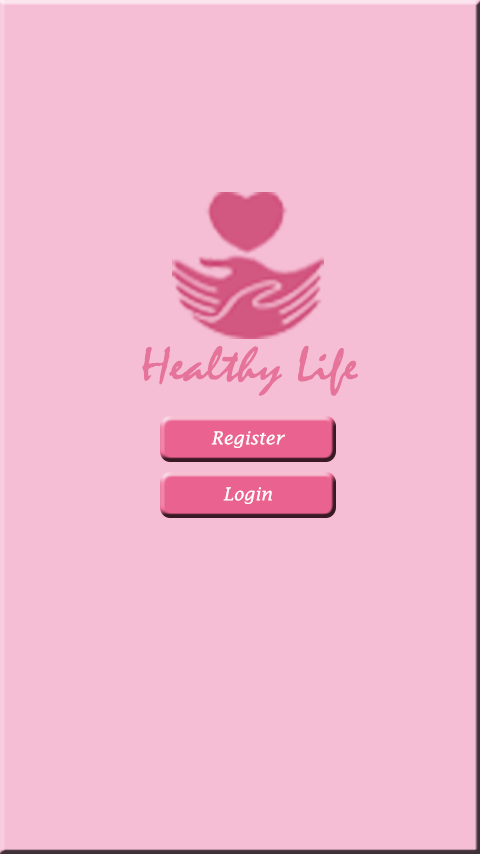
<style>
.page{position:relative;width:480px;height:854px;background:#f5bed5}
.page>*{position:absolute;margin:0}
.t1{font:50.5px "Mistral";color:#e67399;scale:1.14 1}
.t2{font:17.8px "LucidaFax-Italic";color:#fefdfd}
</style>
<div class="page">
<p class="t1" style="left:142px;top:345px;width:216px;height:51px">Healthy Life</p>
<p class="t2" style="left:211px;top:431px;width:75px;height:17px">Register</p>
<p class="t2" style="left:223px;top:487px;width:49px;height:17px">Login</p>
</div>
